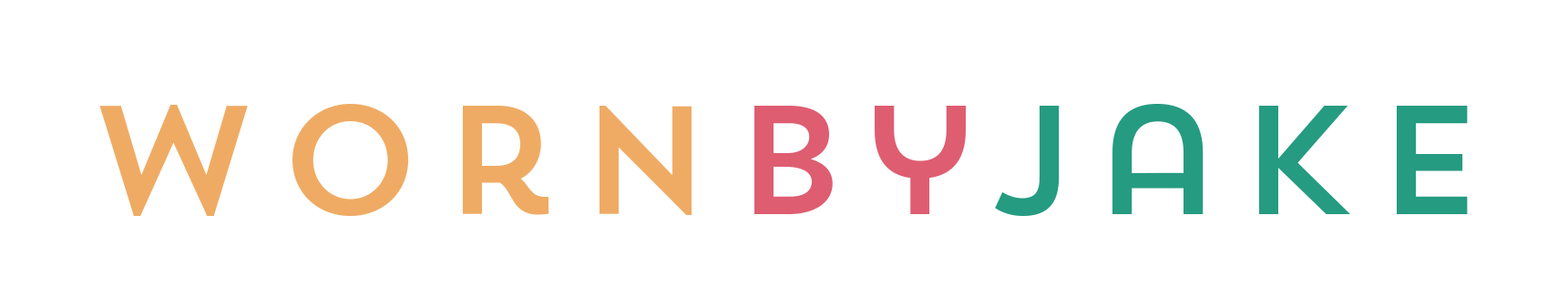
<style>
.page{position:relative;width:1568px;height:308px;background:#ffffff}
.page>*{position:absolute;margin:0}
.t1{font:154px "TrendSansOne";letter-spacing:0.094em;color:#efab64}
.t2{font:154px "TrendSansOne";letter-spacing:0.094em;color:#de5d71}
.t3{font:154px "TrendSansOne";letter-spacing:0.094em;color:#259b81}
</style>
<div class="page">
<p class="t1" style="left:99px;top:104px;width:1369px;height:112px">worn<span class="t2">by</span><span class="t3">jake</span></p>
</div>
